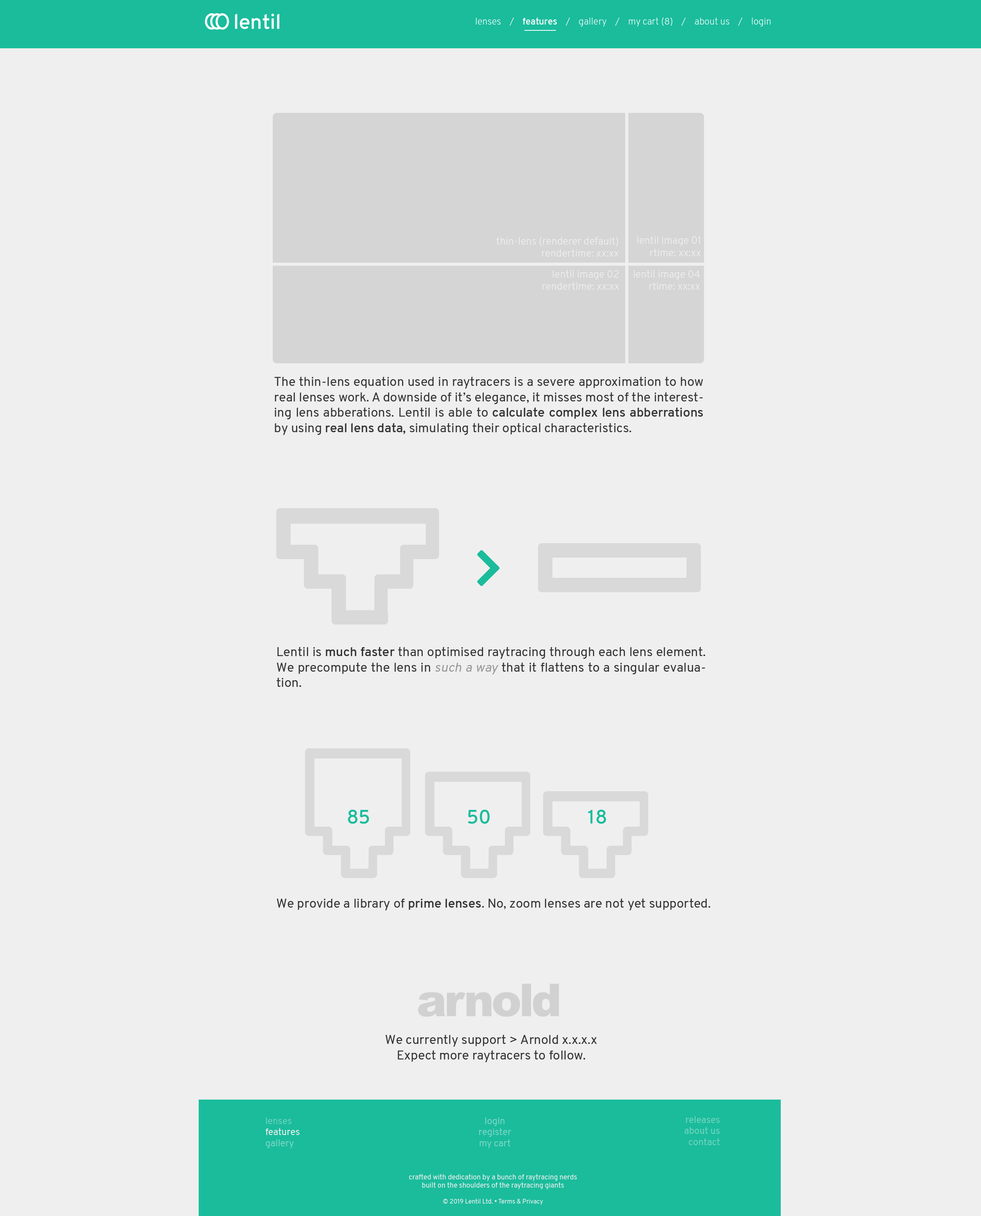
<style>
.page{position:relative;width:981px;height:1216px;background:#efefef}
.page>*{position:absolute;margin:0}
.t1{font:21px "Overpass-SemiBold";color:#ffffff}
.t2{font:9.3px "Overpass-ExtraLight";color:#ffffff}
.t3{font:9.3px "Overpass-SemiBold";color:#ffffff}
.t4{font:10.2px "Overpass-Light";color:#efefef}
.t5{font:12.9px "Overpass-Regular";color:#333333}
.t6{font:12.9px "Overpass-SemiBold";color:#333333}
.t7{font:12.9px "Overpass-Regular";color:#989898;font-style:italic}
.t8{font:19.5px "Overpass-SemiBold";color:#1abc9c}
.t9{font:9.3px "Overpass-Regular";color:#efefef}
.t10{font:9.3px "Overpass-Regular";color:#6bd1bc}
.t11{font:9.3px "Overpass-Regular";color:#7bd6c4}
.t12{font:9.3px "Overpass-Regular";color:#72d3bf}
.t13{font:7px "Overpass-Regular";color:#efefef}
.t14{font:6.2px "Overpass-Regular";color:#efefef}
</style>
<div class="page">
<p class="t1" style="left:235px;top:14px;width:44px;height:15px">lentil</p>
<p class="t2" style="left:475px;top:17px;width:295px;height:9px">lenses    /    <span class="t3">features</span>    /    gallery    /    my cart (8)    /    about us    /    login</p>
<p class="t4" style="left:496px;top:237px;width:122px;height:20px;text-align:right">thin-lens (renderer default)<br>rendertime: xx:xx</p>
<p class="t4" style="left:637px;top:236px;width:64px;height:20px;text-align:right">lentil image 01<br>rtime: xx:xx</p>
<p class="t4" style="left:542px;top:270px;width:77px;height:20px;text-align:right">lentil image 02<br>rendertime: xx:xx</p>
<p class="t4" style="left:633px;top:270px;width:66px;height:20px;text-align:right">lentil image 04<br>rtime: xx:xx</p>
<p class="t5" style="left:274px;top:377px;width:429px;height:58px;text-align:justify">The thin-lens equation used in raytracers is a severe approximation to how real lenses work. A downside of it’s elegance, it misses most of the interesting lens abberations. Lentil is able to <span class="t6">calculate complex lens abberrations</span> by using <span class="t6">real lens data, </span>simulating their optical characteristics.</p>
<p class="t5" style="left:276px;top:647px;width:429px;height:40px;text-align:justify">Lentil is <span class="t6">much faster</span> than optimised raytracing through each lens element. We precompute the lens in <span class="t7">such a way</span> that it flattens to a singular evaluation.</p>
<p class="t8" style="left:348px;top:810px;width:21px;height:14px">85</p>
<p class="t8" style="left:468px;top:810px;width:21px;height:14px">50</p>
<p class="t8" style="left:588px;top:810px;width:18px;height:14px">18</p>
<p class="t5" style="left:276px;top:898px;width:434px;height:12px">We provide a library of <span class="t6">prime lenses</span>. No, zoom lenses are not yet supported.</p>
<p class="t5" style="left:385px;top:1035px;width:212px;height:27px;text-align:center">We currently support &gt; Arnold x.x.x.x<br>Expect more raytracers to follow.</p>
<p class="t9" style="left:265px;top:1117px;width:34px;height:31px"><span class="t10">lenses<br></span>features<br><span class="t11">gallery</span></p>
<p class="t11" style="left:479px;top:1117px;width:32px;height:31px;text-align:center">login<br>register<br>my cart</p>
<p class="t12" style="left:684px;top:1116px;width:36px;height:29px;text-align:right">releases<br>about us<br>contact</p>
<p class="t13" style="left:409px;top:1174px;width:168px;height:31px;text-align:center">crafted with dedication by a bunch of raytracing nerds<br>built on the shoulders of the raytracing giants<br><br><span class="t14">© 2019 Lentil Ltd. • Terms &amp; Privacy</span></p>
</div>
